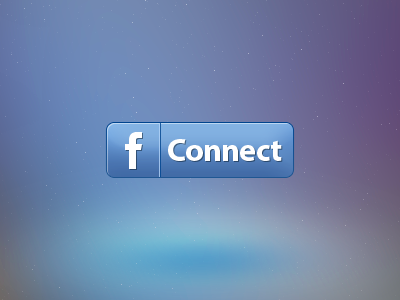
<style>
.page{position:relative;width:400px;height:300px}
.page>*{position:absolute;margin:0}
.t1{font:32.6px "MyriadPro-Bold";letter-spacing:-0.015em;color:#ffffff}
</style>
<div class="page">
<p class="t1" style="left:168px;top:139px;width:114px;height:22px">Connect</p>
</div>
